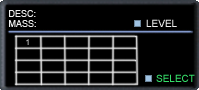
<style>
.page{position:relative;width:199px;height:90px;background:#000000}
.page>*{position:absolute;margin:0}
.t1{font:9px/10px "ArialMT";color:#eeeeee}
.t2{font:10px "ArialMT";color:#eeeeee}
.t3{font:8px "ArialMT"}
.t4{font:10px "ArialMT";color:#35de69}
</style>
<div class="page">
<p class="t1" style="left:9px;top:10px;width:27px;height:17px">DESC:<br>MASS:</p>
<p class="t2" style="left:146px;top:19px;width:31px;height:8px">LEVEL</p>
<p class="t3" style="left:26px;top:39px;width:3px;height:6px">1</p>
<p class="t4" style="left:156px;top:74px;width:39px;height:8px">SELECT</p>
</div>
